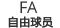
<style>
.page{position:relative;width:60px;height:28px;background:#ffffff}
.page>*{position:absolute;margin:0}
.t1{font:11px "MicrosoftYaHei";letter-spacing:0.01em;color:#333333;font-weight:bold}
</style>
<div class="page">
<p class="t1" style="left:8px;top:16px;width:45px;height:12px">自由球员</p>
</div>
